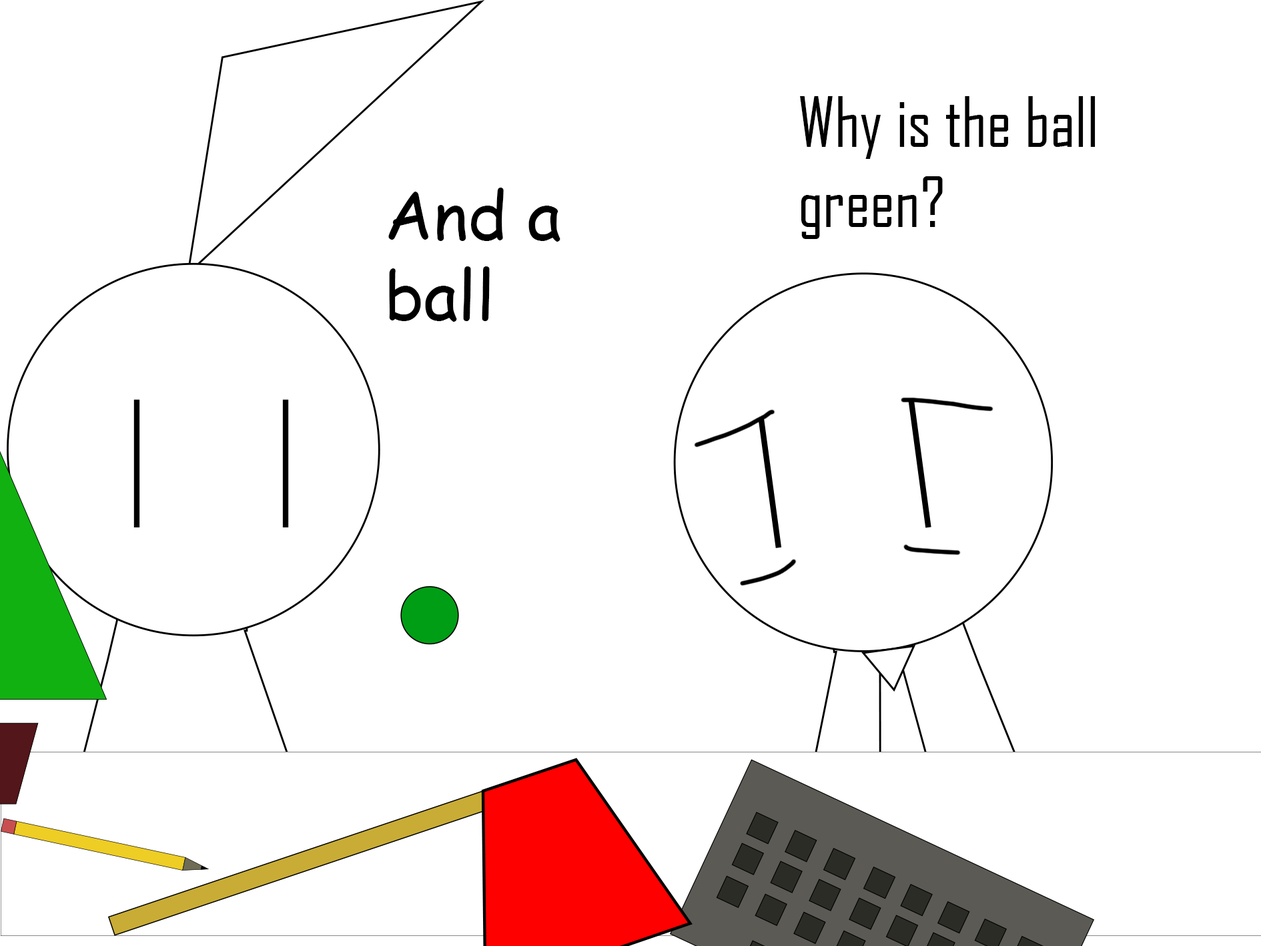
<style>
.page{position:relative;width:1261px;height:946px;background:#ffffff}
.page>*{position:absolute;margin:0}
.t1{font:66.7px "AgencyFB-Reg";color:#000000}
.t2{font:66.7px "ComicSansMS";color:#000000}
</style>
<div class="page">
<p class="t1" style="left:800px;top:96px;width:296px;height:143px">Why is the ball green?</p>
<p class="t2" style="left:388px;top:188px;width:173px;height:134px">And a ball</p>
</div>
